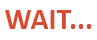
<style>
.page{position:relative;width:97px;height:40px;background:#ffffff}
.page>*{position:absolute;margin:0}
.t1{font:30px "Calibri-Bold";color:#d94c32}
</style>
<div class="page">
<p class="t1" style="left:5px;top:10px;width:87px;height:19px">WAIT...</p>
</div>
